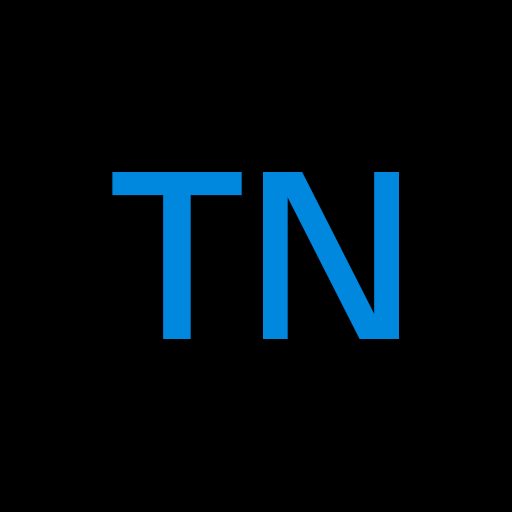
<style>
.page{position:relative;width:512px;height:512px;background:#000000}
.page>*{position:absolute;margin:0}
.t1{font:250px "FrutigerNextLT-Medium";color:#0088df}
</style>
<div class="page">
<p class="t1" style="left:112px;top:172px;width:287px;height:167px">TN</p>
</div>
